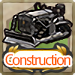
<style>
.page{position:relative;width:75px;height:75px}
.page>*{position:absolute;margin:0}
.t1{font:16px "AdobeClean-SemiCn";letter-spacing:-0.08em;color:#ff5a00}
</style>
<div class="page">
<p class="t1" style="left:5px;top:54px;width:66px;height:12px">Construction</p>
</div>
